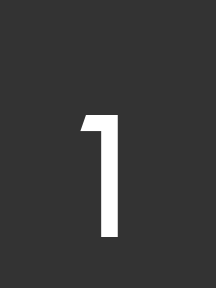
<style>
.page{position:relative;width:216px;height:288px;background:#333333}
.page>*{position:absolute;margin:0}
.t1{font:196px "TwCenMT-Regular";color:#ffffff}
</style>
<div class="page">
<p class="t1" style="left:80px;top:115px;width:38px;height:122px">1</p>
</div>
